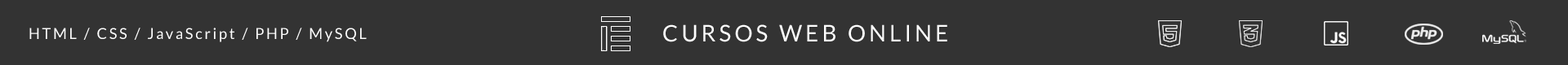
<style>
.page{position:relative;width:1568px;height:65px;background:#333333}
.page>*{position:absolute;margin:0}
.t1{font:15.2px "Lato-Regular";letter-spacing:0.15em;color:#ffffff}
.t2{font:23.1px "Lato-Regular";letter-spacing:0.15em;color:#ffffff}
</style>
<div class="page">
<p class="t1" style="left:29px;top:28px;width:338px;height:14px">HTML / CSS / JavaScript / PHP / MySQL</p>
<p class="t2" style="left:663px;top:24px;width:284px;height:18px">CURSOS WEB ONLINE</p>
</div>
